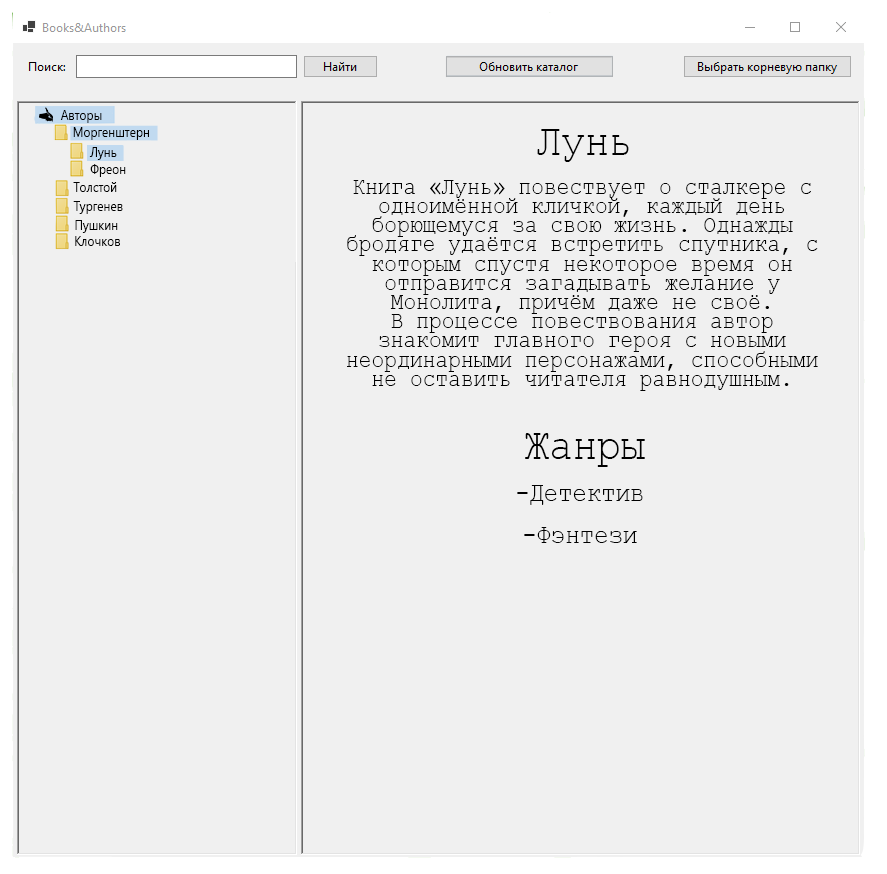
<style>
.page{position:relative;width:887px;height:874px;background:#f0f0f0}
.page>*{position:absolute;margin:0}
.t1{font:13.5px "SegoeUI";scale:0.89 1}
.t2{font:45px "CourierNewPSMT";color:#000000;scale:0.89 1}
.t3{font:13.5px "SegoeUI";color:#000000;scale:0.89 1}
.t4{font:24px "CourierNewPSMT";color:#000000;scale:0.89 1}
.t5{font:27px "CourierNewPSMT";color:#000000;scale:0.89 1}
</style>
<div class="page">
<p class="t1" style="left:60px;top:109px;width:42px;height:13px">Авторы</p>
<p class="t1" style="left:73px;top:126px;width:76px;height:13px">Моргенштерн</p>
<p class="t2" style="left:537px;top:129px;width:92px;height:33px">Лунь</p>
<p class="t3" style="left:89px;top:147px;width:28px;height:13px">Лунь</p>
<p class="t4" style="left:347px;top:180px;width:471px;height:211px;text-align:center">Книга «Лунь» повествует о сталкере с одноимённой кличкой, каждый день борющемуся за свою жизнь. Однажды бродяге удаётся встретить спутника, с которым спустя некоторое время он отправится загадывать желание у Монолита, причём даже не своё.<br>В процессе повествования автор знакомит главного героя с новыми неординарными персонажами, способными не оставить читателя равнодушным.</p>
<p class="t2" style="left:525px;top:433px;width:120px;height:34px">Жанры</p>
<p class="t5" style="left:517px;top:485px;width:126px;height:20px">-Детектив</p>
<p class="t5" style="left:524px;top:527px;width:113px;height:16px">-Фэнтези</p>
</div>
